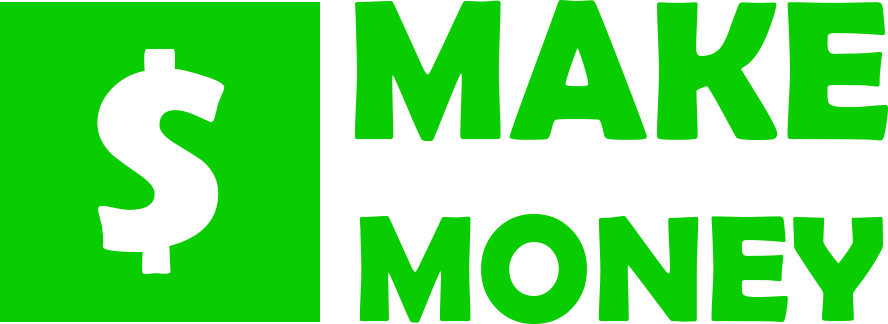
<style>
.page{position:relative;width:888px;height:324px;background:#0acd00}
.page>*{position:absolute;margin:0}
.t1{font:152px "BerlinSansFBDemi-Bold";color:#0acd00}
.t2{font:200px "BerlinSansFBDemi-Bold";color:#0acd00}
.t3{font:300px "BerlinSansFBDemi-Bold";color:#ffffff}
</style>
<div class="page">
<p class="t1" style="left:354px;top:0px;width:534px;height:324px;text-align:center"><span class="t2">MAKE<br></span>MONEY</p>
<p class="t3" style="left:97px;top:49px;width:128px;height:226px">$</p>
</div>
